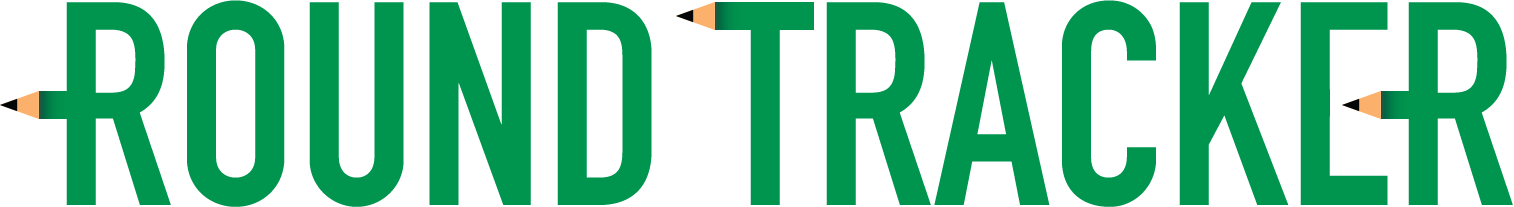
<style>
.page{position:relative;width:1514px;height:207px;background:#ffffff}
.page>*{position:absolute;margin:0}
.t1{font:284.7px "DINEngschriftLTPro";color:#00954e;text-transform:uppercase}
</style>
<div class="page">
<p class="t1" style="left:66px;top:0px;width:1322px;height:207px">ROUND TRACKE</p>
<p class="t1" style="left:1408px;top:2px;width:105px;height:203px">R</p>
</div>
